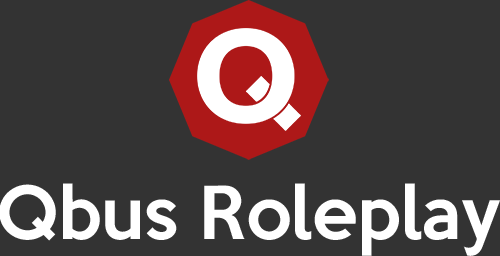
<style>
.page{position:relative;width:500px;height:256px;background:#333333}
.page>*{position:absolute;margin:0}
.t1{font:66.7px "KeepCalm-Medium";color:#ffffff}
</style>
<div class="page">
<p class="t1" style="left:0px;top:183px;width:500px;height:73px">Qbus Roleplay</p>
</div>
